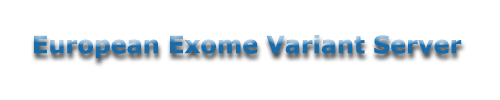
<style>
.page{position:relative;width:500px;height:100px;background:#ffffff}
.page>*{position:absolute;margin:0}
.t1{font:24px "Verdana-Bold";color:#196cac}
</style>
<div class="page">
<p class="t1" style="left:34px;top:35px;width:428px;height:24px">European Exome Variant Server</p>
</div>
